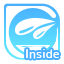
<style>
.page{position:relative;width:64px;height:64px;background:#ffffff}
.page>*{position:absolute;margin:0}
.t1{font:12px "JK-Gothic-M";color:#ffffff}
</style>
<div class="page">
<p class="t1" style="left:26px;top:49px;width:33px;height:10px">Inside</p>
</div>
